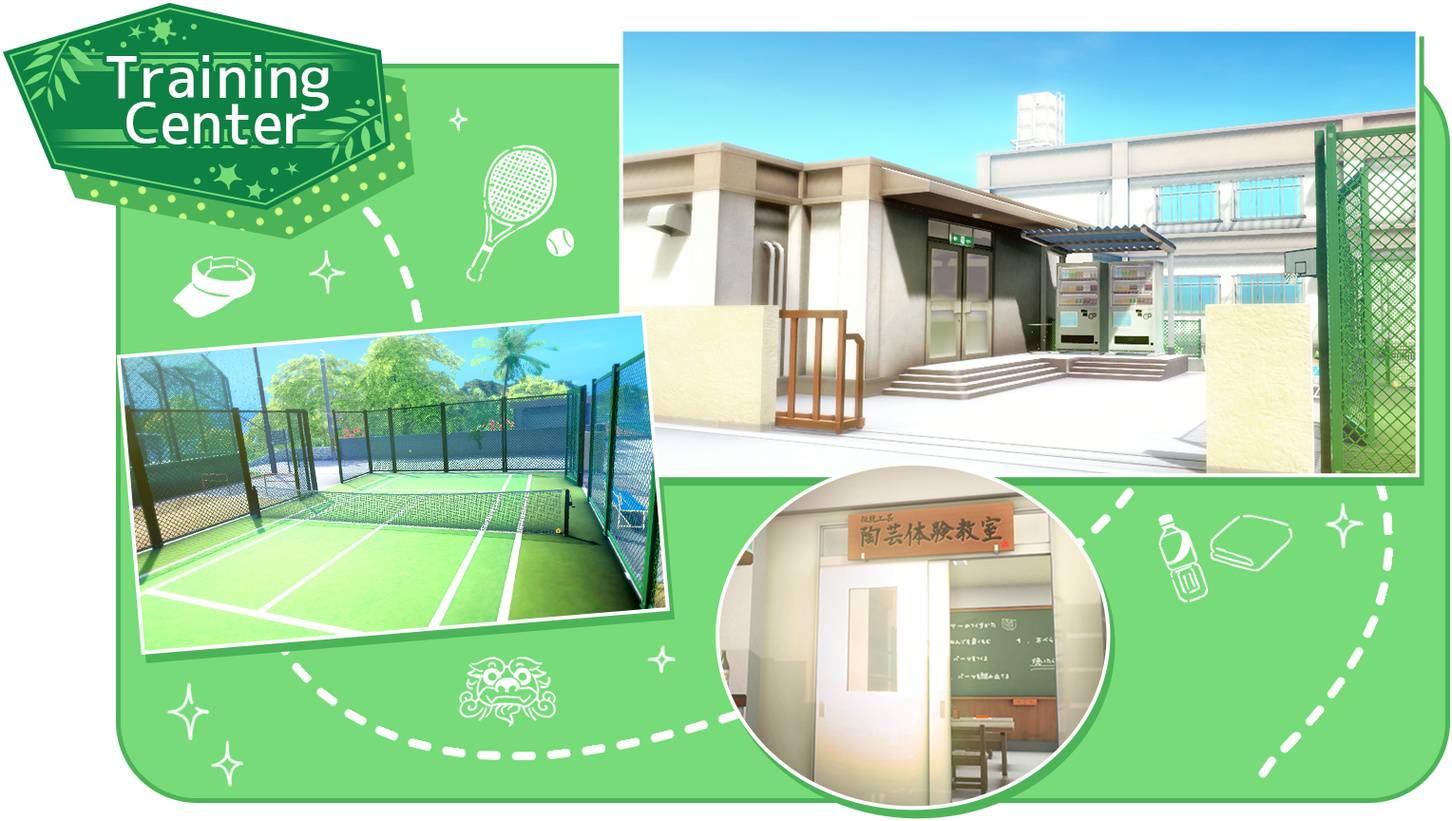
<style>
.page{position:relative;width:1452px;height:821px;background:#76db78}
.page>*{position:absolute;margin:0}
.t1{font:57px/45.6px "JK-Gothic-M";color:#ffffff}
</style>
<div class="page">
<p class="t1" style="left:106px;top:55px;width:223px;height:89px;text-align:center">Training<br>Center</p>
</div>
